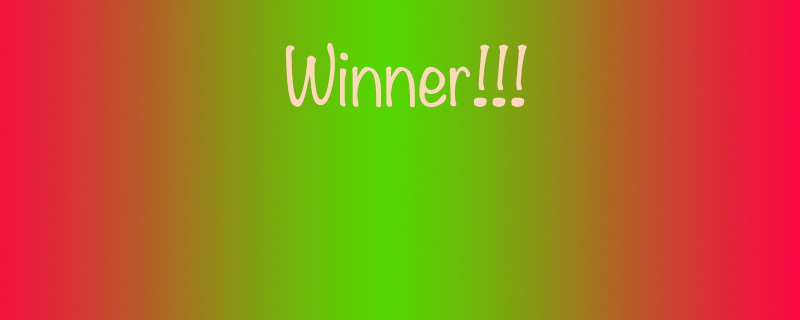
<style>
.page{position:relative;width:800px;height:320px}
.page>*{position:absolute;margin:0}
.t1{font:72px "Noteworthy-Light";color:#ffd7bd}
</style>
<div class="page">
<p class="t1" style="left:286px;top:43px;width:241px;height:65px">Winner!!!</p>
</div>
